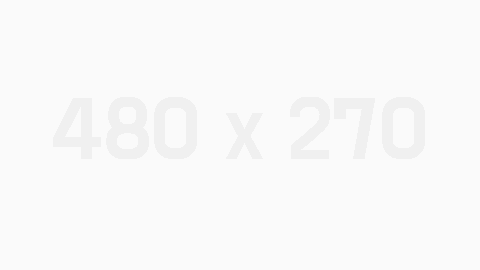
<style>
.page{position:relative;width:480px;height:270px;background:#fafafa}
.page>*{position:absolute;margin:0}
.t1{font:72px "BMDoHyeon-OTF";color:#f0f0f0}
</style>
<div class="page">
<p class="t1" style="left:53px;top:97px;width:372px;height:62px">480 x 270</p>
</div>
